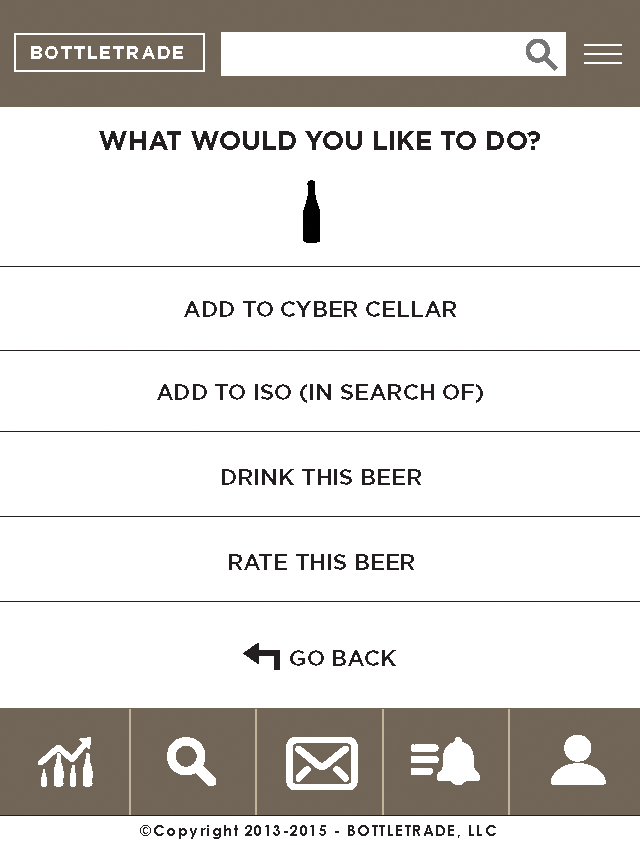
<style>
.page{position:relative;width:640px;height:845px;background:#ffffff}
.page>*{position:absolute;margin:0}
.t1{font:18px "Gotham-Bold";letter-spacing:0.099em;color:#ffffff}
.t2{font:26px "Gotham-Bold";color:#231f20}
.t3{font:22px "Gotham-Medium";color:#231f20}
.t4{font:15px "CenturyGothic-Bold";letter-spacing:0.099em;color:#231f20}
</style>
<div class="page">
<p class="t1" style="left:31px;top:46px;width:152px;height:13px">BOTTLETRADE</p>
<p class="t2" style="left:99px;top:131px;width:441px;height:19px">WHAT WOULD YOU LIKE TO DO?</p>
<p class="t3" style="left:184px;top:301px;width:272px;height:16px">ADD TO CYBER CELLAR</p>
<p class="t3" style="left:157px;top:384px;width:326px;height:19px">ADD TO ISO (IN SEARCH OF)</p>
<p class="t3" style="left:222px;top:469px;width:199px;height:16px">DRINK THIS BEER</p>
<p class="t3" style="left:229px;top:554px;width:185px;height:16px">RATE THIS BEER</p>
<p class="t3" style="left:290px;top:650px;width:106px;height:16px">GO BACK</p>
<p class="t4" style="left:140px;top:825px;width:356px;height:14px">©Copyright 2013-2015 - BOTTLETRADE, LLC</p>
</div>
